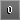
<style>
.page{position:relative;width:20px;height:20px}
.page>*{position:absolute;margin:0}
.t1{font:9px "Tahoma";color:#ffffff}
</style>
<div class="page">
<p class="t1" style="left:8px;top:6px;width:4px;height:7px">0</p>
</div>
